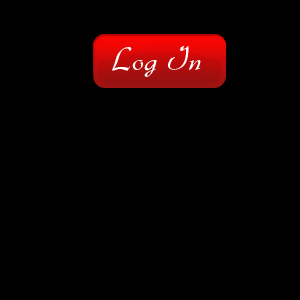
<style>
.page{position:relative;width:300px;height:300px;background:#000000}
.page>*{position:absolute;margin:0}
.t1{font:33.6px "Gabrielle";letter-spacing:0.005em;color:#ffffff}
</style>
<div class="page">
<p class="t1" style="left:112px;top:46px;width:89px;height:31px">Log In</p>
</div>
